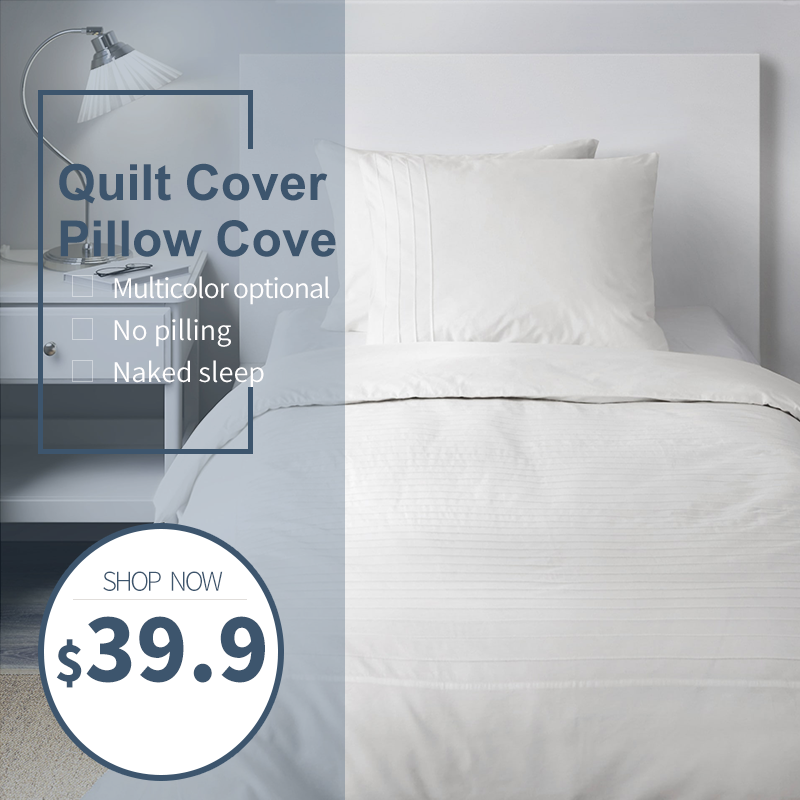
<style>
.page{position:relative;width:800px;height:800px}
.page>*{position:absolute;margin:0}
.t1{font:50px/56.2px "Arial-BoldMT";color:#3d556d}
.t2{font:27px/42px "SourceHanSansCN-Normal";color:#ffffff}
.t3{font:27px/42px "SourceHanSansCN-Normal";letter-spacing:-0.04em;color:#fffefe}
.t4{font:26.1px "SourceHanSansCN-Light";letter-spacing:-0.1em;color:#3d556d}
.t5{font:85.4px "SourceHanSansCN-Heavy";color:#3d556d}
.t6{font:49.4px "SourceHanSansCN-Heavy";color:#3d556d}
</style>
<div class="page">
<p class="t1" style="left:59px;top:163px;width:277px;height:94px">Quilt Cover <br>Pillow Cove</p>
<p class="t2" style="left:114px;top:276px;width:216px;height:113px"><span class="t3">Multicolor optional<br></span>No pilling<br>Naked sleep</p>
<p class="t4" style="left:103px;top:571px;width:120px;height:20px">SHOP   NOW</p>
<p class="t5" style="left:56px;top:616px;width:209px;height:72px"><span class="t6">$</span>39.9</p>
</div>
